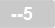
<style>
.page{position:relative;width:55px;height:28px;background:#c9c9c9}
.page>*{position:absolute;margin:0}
.t1{font:18.2px "Arial-BoldMT";color:#ffffff}
</style>
<div class="page">
<p class="t1" style="left:11px;top:7px;width:22px;height:13px">--5</p>
</div>
